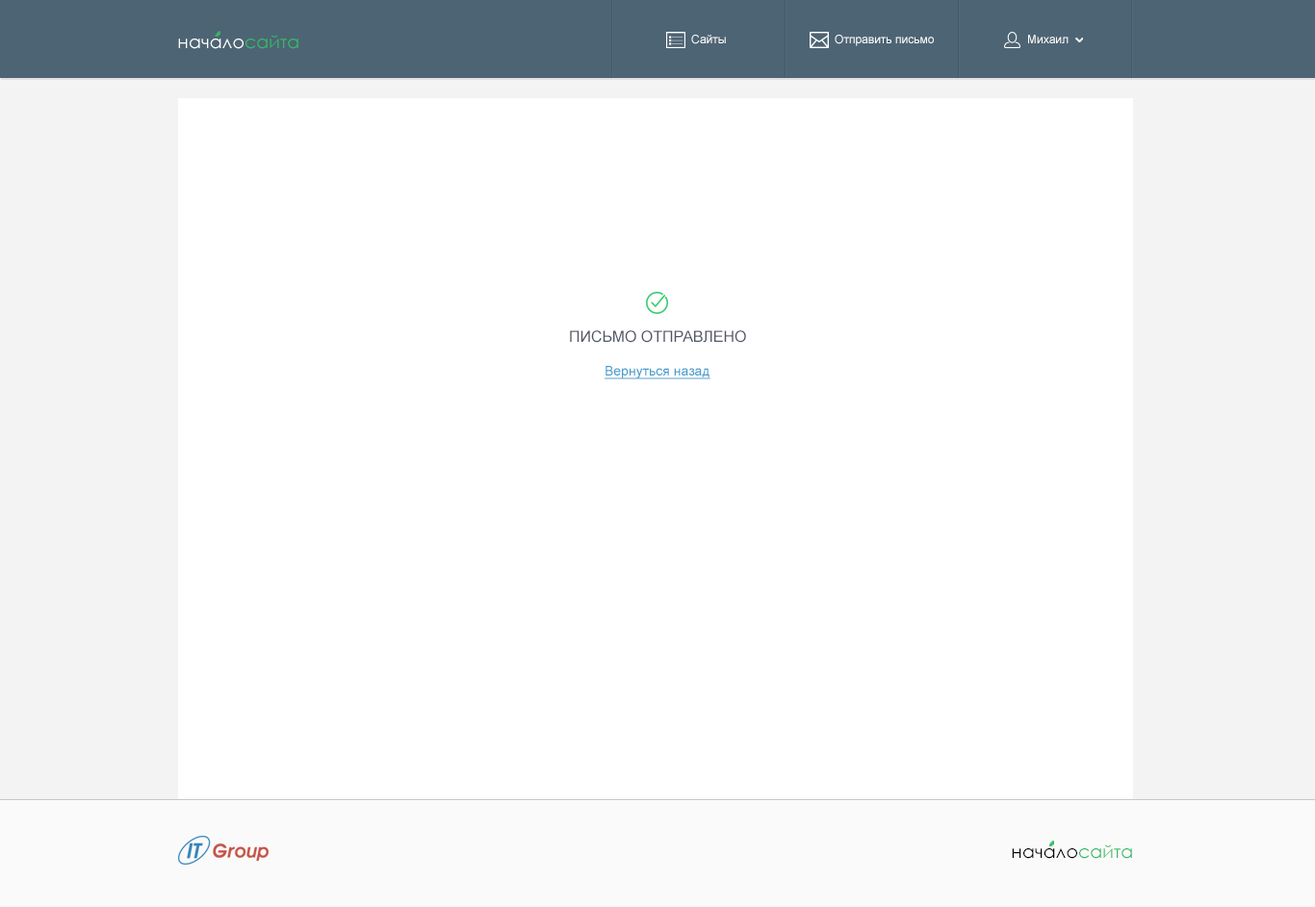
<style>
.page{position:relative;width:1315px;height:907px;background:#ffffff}
.page>*{position:absolute;margin:0}
.t1{font:17.9px "CenturyGothic";color:#ffffff}
.t2{font:17.9px "CenturyGothic";color:#34ba65}
.t3{font:11.6px "ArialMT";color:#ffffff}
.t4{font:15.4px "ArialMT";color:#515567}
.t5{font:13.5px "ArialMT";color:#479ccc;text-decoration:underline}
.t6{font:17.9px "CenturyGothic";color:#000000}
</style>
<div class="page">
<p class="t1" style="left:178px;top:35px;width:120px;height:14px">начало<span class="t2">сайта</span></p>
<p class="t3" style="left:691px;top:35px;width:35px;height:9px">Сайты</p>
<p class="t3" style="left:835px;top:35px;width:99px;height:11px">Отправить письмо</p>
<p class="t3" style="left:1028px;top:35px;width:41px;height:8px">Михаил</p>
<p class="t4" style="left:570px;top:330px;width:176px;height:13px">ПИСЬМО ОТПРАВЛЕНО</p>
<p class="t5" style="left:605px;top:366px;width:105px;height:13px">Вернуться назад</p>
<p class="t6" style="left:1012px;top:844px;width:120px;height:15px">начало<span class="t2">сайта</span></p>
</div>
